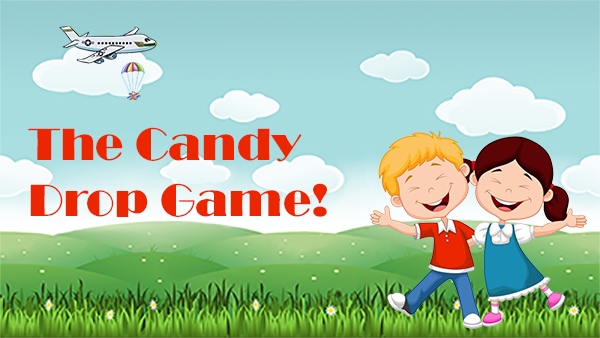
<style>
.page{position:relative;width:600px;height:338px}
.page>*{position:absolute;margin:0}
.t1{font:46.9px "Broadway";color:#ec2601}
</style>
<div class="page">
<p class="t1" style="left:28px;top:127px;width:299px;height:90px">The Candy Drop Game!</p>
</div>
